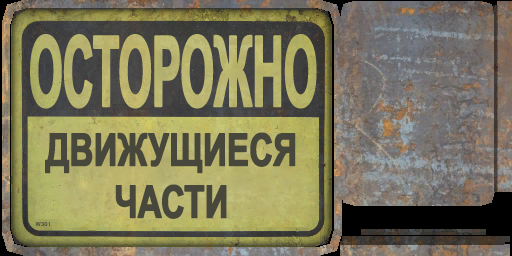
<style>
.page{position:relative;width:512px;height:256px}
.page>*{position:absolute;margin:0}
.t1{font:44.9px/52px "Arial-BoldMT";letter-spacing:-0.02em;color:#48473b;font-weight:bold;scale:0.74 1}
</style>
<div class="page">
<p class="t1" style="left:45px;top:132px;width:251px;height:87px;text-align:center">ДВИЖУЩИЕСЯ<br>ЧАСТИ</p>
</div>
